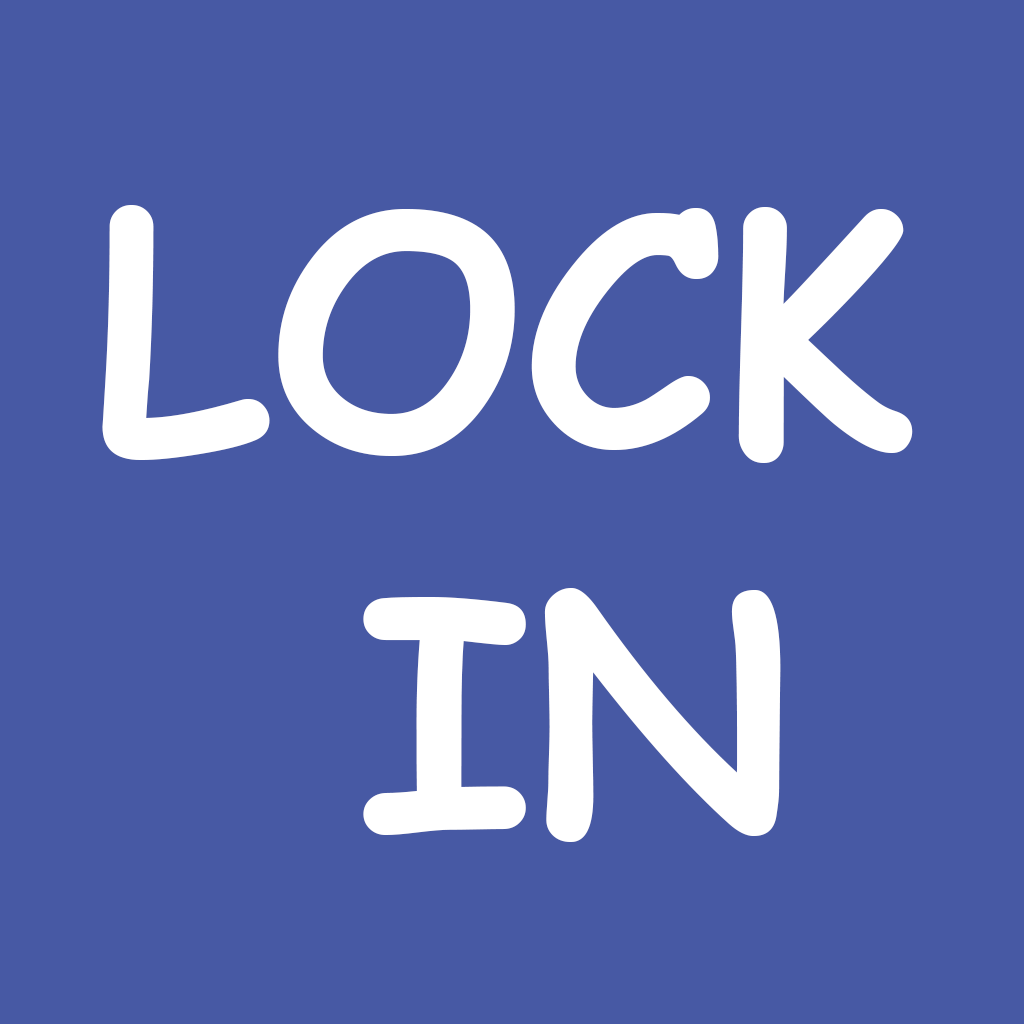
<style>
.page{position:relative;width:1024px;height:1024px;background:#4759a4}
.page>*{position:absolute;margin:0}
.t1{font:320px "ComicSansMS-Bold";color:#ffffff}
</style>
<div class="page">
<p class="t1" style="left:102px;top:205px;width:811px;height:637px;text-align:center">LOCK<br> IN</p>
</div>
